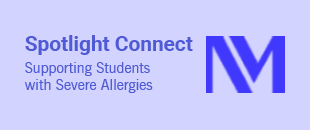
<style>
.page{position:relative;width:310px;height:130px;background:#d3d3ff}
.page>*{position:absolute;margin:0}
.t1{font:20.8px "Roboto-Bold";color:#4f5bd4}
.t2{font:14.6px "NewsGothicBT-Roman";color:#4f5bd4}
</style>
<div class="page">
<p class="t1" style="left:25px;top:35px;width:168px;height:20px">Spotlight Connect</p>
<p class="t2" style="left:24px;top:62px;width:129px;height:31px">Supporting Students<br>with Severe Allergies</p>
</div>
